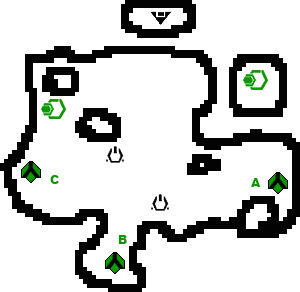
<style>
.page{position:relative;width:300px;height:292px;background:#ffffff}
.page>*{position:absolute;margin:0}
.t1{font:12px "Arial-Black";color:#0c9801}
</style>
<div class="page">
<p class="t1" style="left:50px;top:175px;width:9px;height:9px">C</p>
<p class="t1" style="left:251px;top:178px;width:10px;height:9px">A</p>
<p class="t1" style="left:118px;top:235px;width:9px;height:9px">B</p>
</div>
